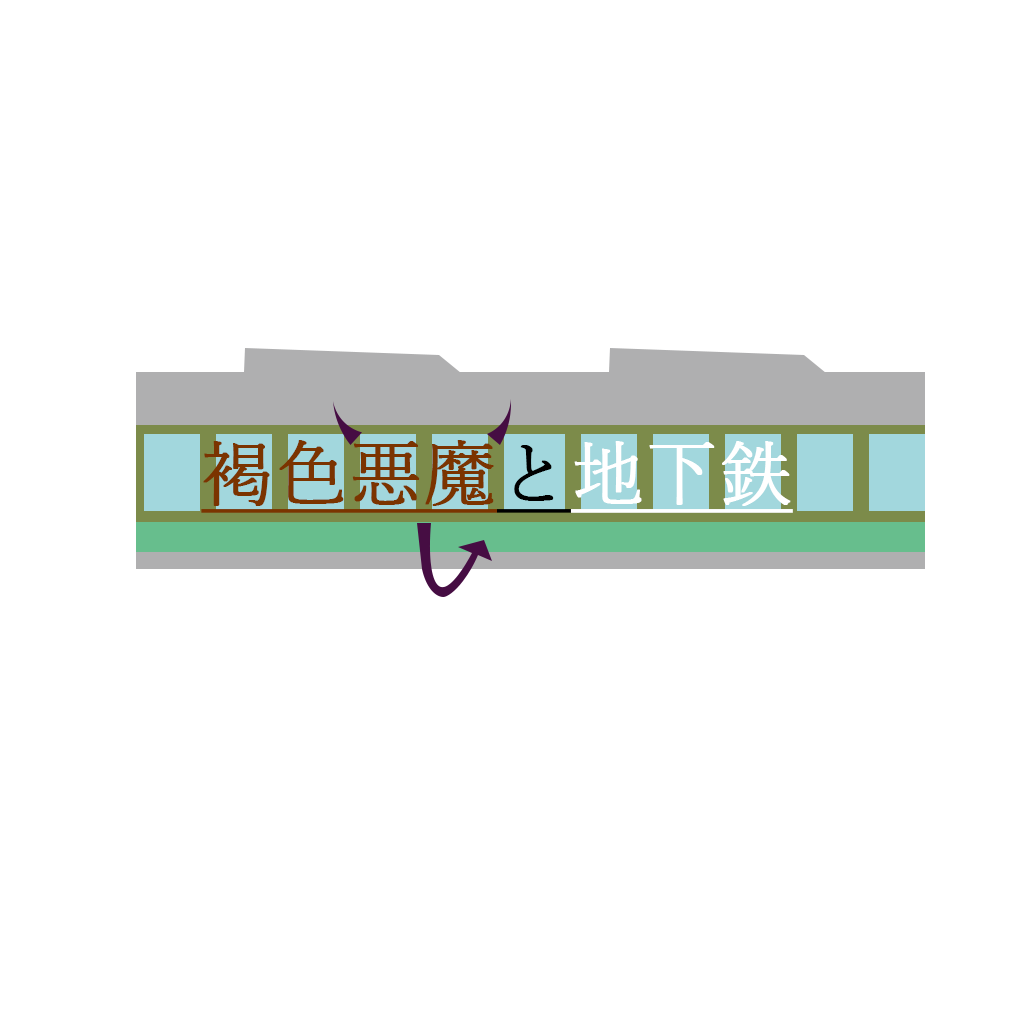
<style>
.page{position:relative;width:1024px;height:1024px;background:#ffffff}
.page>*{position:absolute;margin:0}
.t1{font:72px "YuMincho-Light";color:#7b3400;font-weight:bold;text-decoration:underline}
.t2{font:72px "YuMincho-Light";color:#000000;font-weight:bold;text-decoration:underline}
.t3{font:72px "YuMincho-Light";color:#ffffff;font-weight:bold;text-decoration:underline}
</style>
<div class="page">
<p class="t1" style="left:201px;top:440px;width:592px;height:73px">褐色悪魔<span class="t2">と</span><span class="t3">地下鉄</span></p>
</div>
